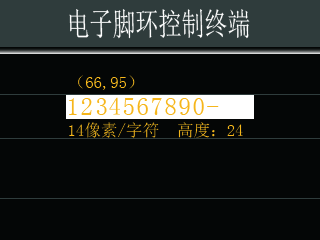
<style>
.page{position:relative;width:320px;height:240px;background:#040606}
.page>*{position:absolute;margin:0}
.t1{font:31.9px "SimSun";color:#ffffff;scale:0.72 1}
.t2{font:16.7px "SimSun";color:#f6b61b}
.t3{font:25px "SimSun";color:#f6b61b}
</style>
<div class="page">
<p class="t1" style="left:69px;top:9px;width:181px;height:30px">电子脚环控制终端</p>
<p class="t2" style="left:78px;top:75px;width:57px;height:15px">（66,95）</p>
<p class="t3" style="left:69px;top:98px;width:8px;height:17px">1</p>
<p class="t3" style="left:81px;top:98px;width:11px;height:17px">2</p>
<p class="t3" style="left:96px;top:98px;width:11px;height:17px">3</p>
<p class="t3" style="left:109px;top:97px;width:11px;height:18px">4</p>
<p class="t3" style="left:123px;top:98px;width:11px;height:17px">5</p>
<p class="t3" style="left:137px;top:98px;width:11px;height:17px">6</p>
<p class="t3" style="left:152px;top:98px;width:10px;height:17px">7</p>
<p class="t3" style="left:165px;top:98px;width:11px;height:17px">8</p>
<p class="t3" style="left:179px;top:98px;width:11px;height:17px">9</p>
<p class="t3" style="left:193px;top:98px;width:11px;height:17px">0</p>
<p class="t3" style="left:207px;top:106px;width:12px;height:1px">-</p>
<p class="t2" style="left:69px;top:122px;width:90px;height:16px">14像素/字符</p>
<p class="t2" style="left:178px;top:122px;width:65px;height:16px">高度：24</p>
</div>
